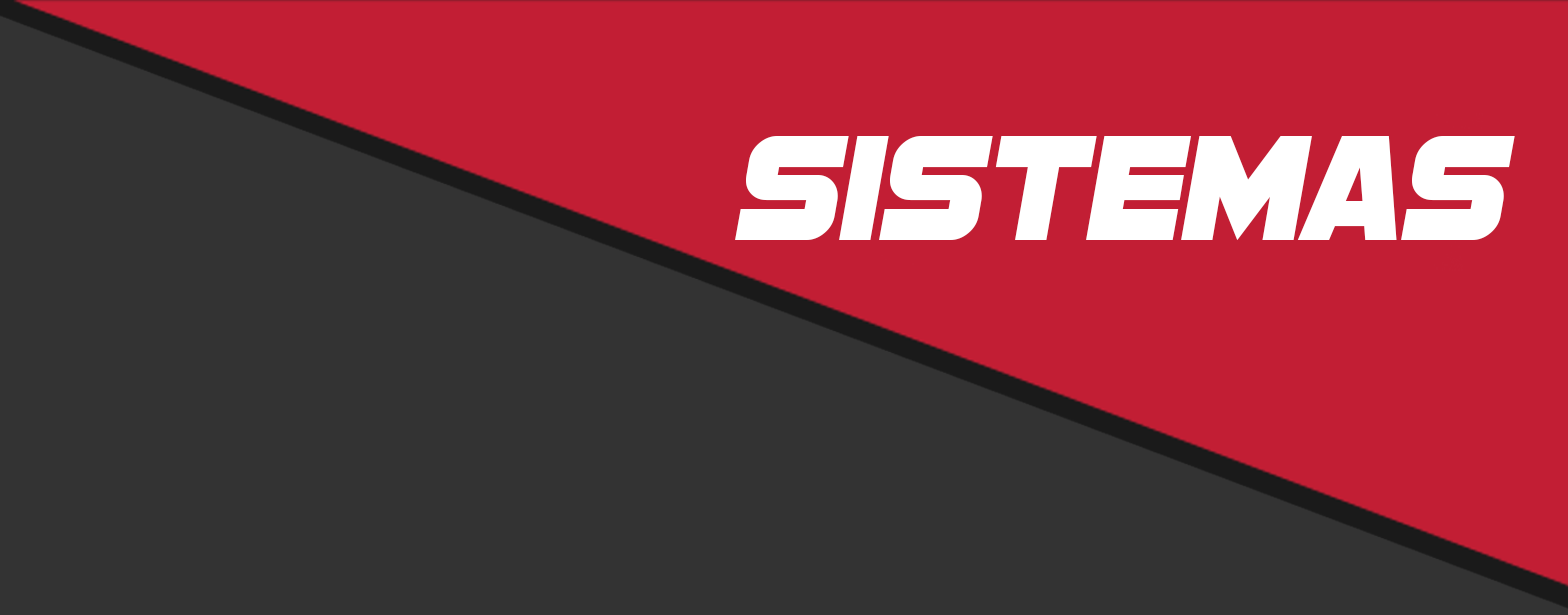
<style>
.page{position:relative;width:1568px;height:615px;background:#333333}
.page>*{position:absolute;margin:0}
.t1{font:155.6px "SFSportsNightNS";color:#ffffff}
</style>
<div class="page">
<p class="t1" style="left:735px;top:136px;width:780px;height:104px">sistemas</p>
</div>
